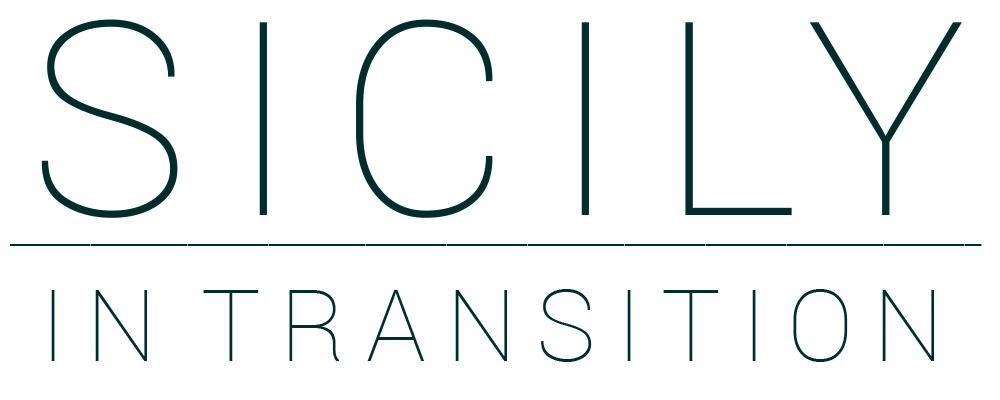
<style>
.page{position:relative;width:1000px;height:400px;background:#ffffff}
.page>*{position:absolute;margin:0}
.t1{font:270.8px "Roboto-Thin";color:#002c2c}
.t2{font:37.5px "Roboto-Light";color:#002c2c}
.t3{font:100px "Roboto-Thin";color:#002c2c}
</style>
<div class="page">
<p class="t1" style="left:41px;top:19px;width:921px;height:199px">SICILY</p>
<p class="t2" style="left:10px;top:244px;width:972px;height:2px">____________________________________________________________</p>
<p class="t3" style="left:51px;top:289px;width:883px;height:73px">IN TRANSITION</p>
</div>
